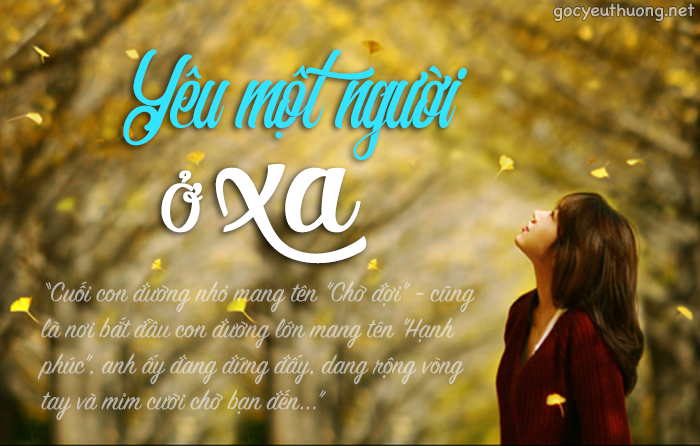
<style>
.page{position:relative;width:700px;height:446px}
.page>*{position:absolute;margin:0}
.t1{font:18px "ChalkboardSE-Regular";color:#c6b9a6}
.t2{font:67.6px "FS-Southamton";color:#32e4ff}
.t3{font:154.2px "SVN-ShintiaScript";color:#ffffff;font-weight:bold}
.t4{font:63.5px "SVN-ShintiaScript";color:#ffffff;font-weight:bold}
.t5{font:30px "SignPainter-HouseScript";color:#cfc6b0;scale:0.96 1}
</style>
<div class="page">
<p class="t1" style="left:554px;top:3px;width:141px;height:18px">gocyeuthuong.net</p>
<p class="t2" style="left:123px;top:49px;width:344px;height:111px">Yêu một người</p>
<p class="t3" style="left:161px;top:164px;width:206px;height:100px"><span class="t4">Ở </span>xa</p>
<p class="t5" style="left:38px;top:281px;width:437px;height:140px">“Cuối con đường nhỏ mang tên "Chờ đợi" - cũng là nơi bắt đầu con đường lớn mang tên "Hạnh phúc", anh ấy đang đứng đấy, dang rộng vòng tay và mỉm cười chờ bạn đến...”</p>
</div>
